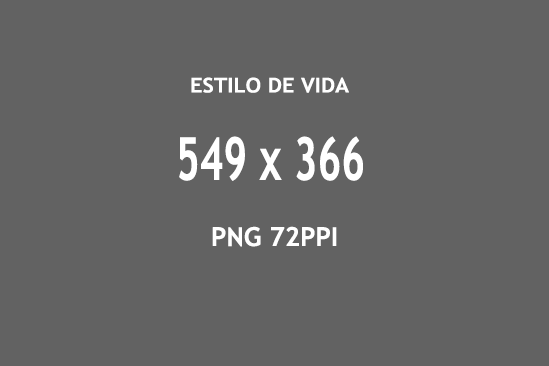
<style>
.page{position:relative;width:549px;height:366px;background:#626262}
.page>*{position:absolute;margin:0}
.t1{font:20.4px "TrebuchetMS-Bold";color:#ffffff;scale:1.08 1}
.t2{font:59.4px "TrebuchetMS-Bold";color:#ffffff;scale:0.68 1}
.t3{font:26.2px "TrebuchetMS-Bold";color:#ffffff}
</style>
<div class="page">
<p class="t1" style="left:191px;top:77px;width:158px;height:16px">ESTILO DE VIDA</p>
<p class="t2" style="left:179px;top:136px;width:184px;height:45px">549 x 366</p>
<p class="t3" style="left:212px;top:226px;width:125px;height:21px">PNG 72PPI</p>
</div>
